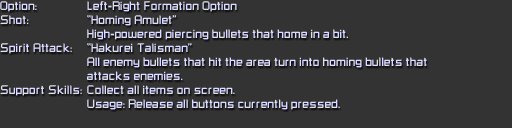
<style>
.page{position:relative;width:512px;height:128px;background:#333333}
.page>*{position:absolute;margin:0}
.t1{font:10px/14px "RussellSquare";color:#ddddff}
</style>
<div class="page">
<p class="t1" style="left:0px;top:1px;width:82px;height:95px">Option:<br>Shot:<br><br>Spirit Attack:<br><br><br>Support Skills:</p>
<p class="t1" style="left:87px;top:1px;width:340px;height:109px">Left-Right Formation Option<br>“Homing Amulet”<br>High-powered piercing bullets that home in a bit.<br>“Hakurei Talisman”<br>All enemy bullets that hit the area turn into homing bullets that<br>attacks enemies.<br>Collect all items on screen.<br>Usage: Release all buttons currently pressed.</p>
</div>
